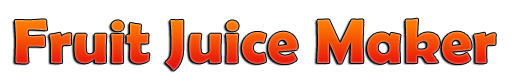
<style>
.page{position:relative;width:512px;height:83px;background:#ffffff}
.page>*{position:absolute;margin:0}
.t1{font:63px "BerlinSansFBDemi-Bold"}
</style>
<div class="page">
<p class="t1" style="left:15px;top:18px;width:481px;height:53px">Fruit Juice Maker</p>
</div>
